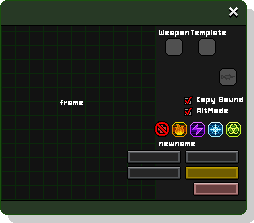
<style>
.page{position:relative;width:254px;height:223px;background:#121212}
.page>*{position:absolute;margin:0}
.t1{font:8px "Hobo";color:#ffffff}
</style>
<div class="page">
<p class="t1" style="left:159px;top:30px;width:30px;height:7px">Weapon</p>
<p class="t1" style="left:191px;top:30px;width:35px;height:7px">Template</p>
<p class="t1" style="left:60px;top:100px;width:23px;height:5px">frame</p>
<p class="t1" style="left:197px;top:97px;width:46px;height:7px">Copy Sound</p>
<p class="t1" style="left:197px;top:108px;width:31px;height:5px">AltMode</p>
<p class="t1" style="left:159px;top:142px;width:36px;height:4px">newname</p>
</div>
